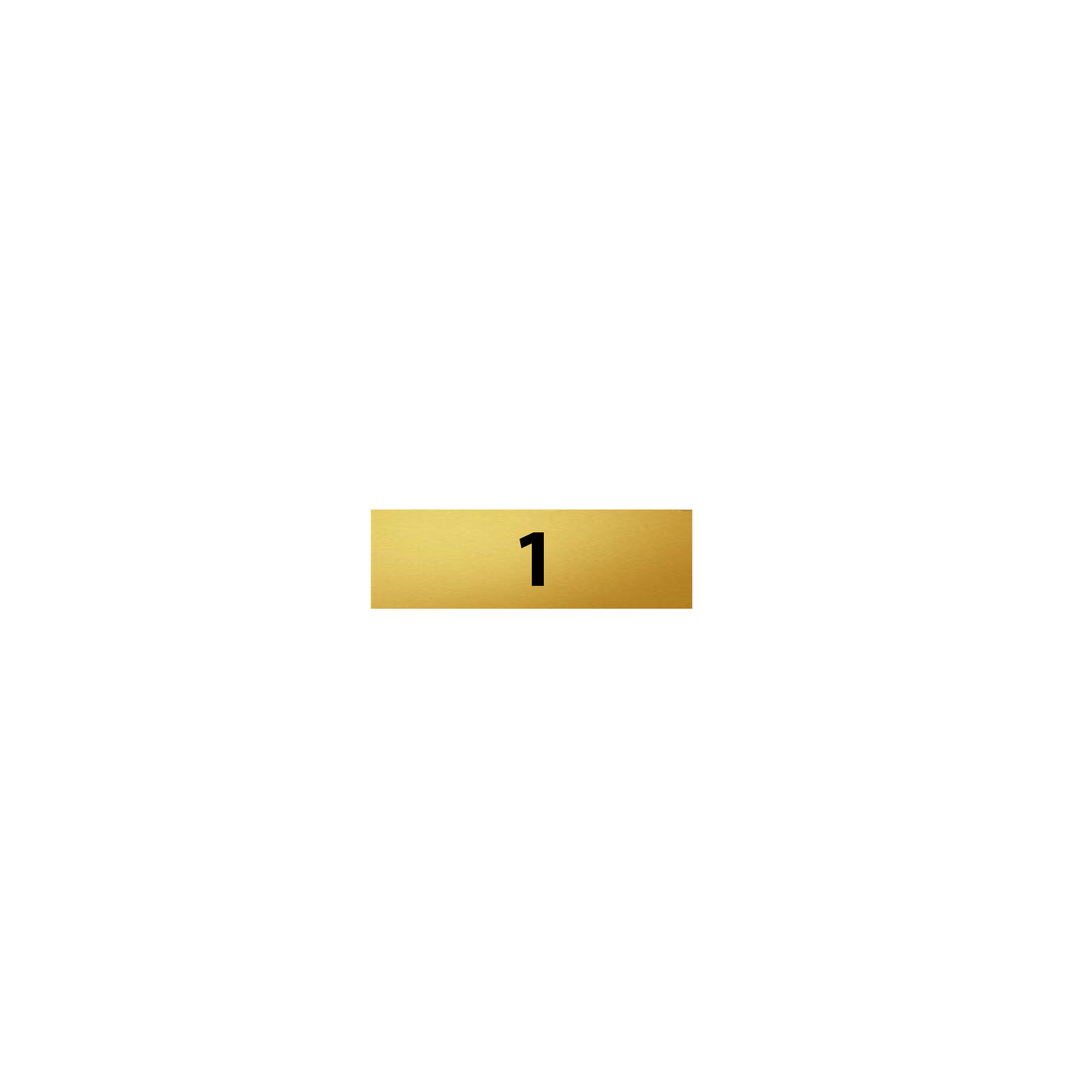
<style>
.page{position:relative;width:1092px;height:1092px;background:#ffffff}
.page>*{position:absolute;margin:0}
.t1{font:81.9px "MyriadPro-Bold";color:#000000}
</style>
<div class="page">
<p class="t1" style="left:519px;top:532px;width:25px;height:54px">1</p>
</div>
